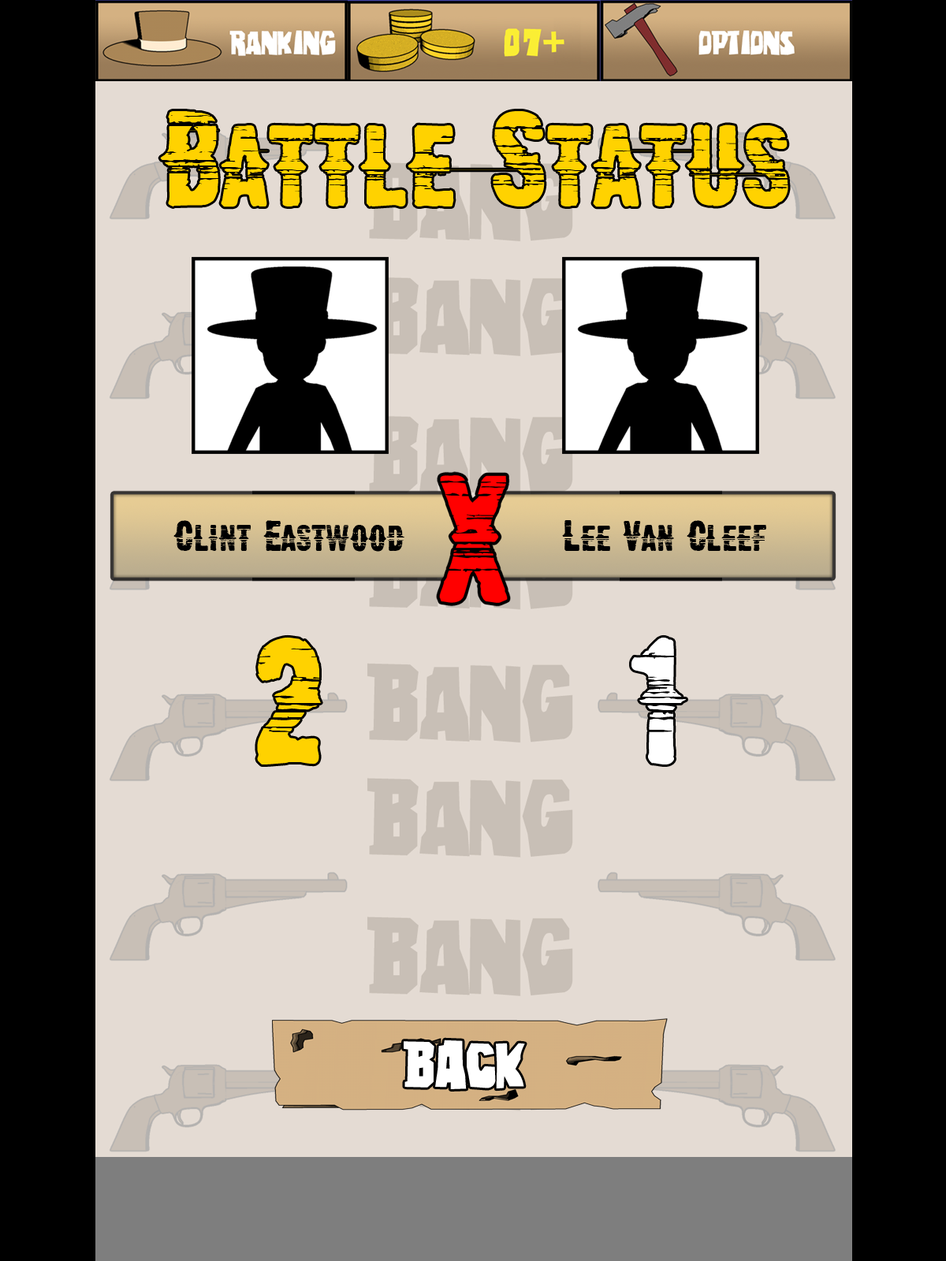
<style>
.page{position:relative;width:946px;height:1261px;background:#e4dbd3}
.page>*{position:absolute;margin:0}
.t1{font:118.2px "CMWesternWoodblockNo2";color:#ffd200}
.t2{font:37.8px "CMWesternWoodblockNo2";color:#000000}
.t3{font:157.6px "CMWesternWoodblockNo2";color:#ffd200}
.t4{font:157.6px "CMWesternWoodblockNo2";color:#ffffff}
.t5{font:56.7px "Eastwood";color:#ffffff}
</style>
<div class="page">
<p class="t1" style="left:160px;top:111px;width:628px;height:96px">Battle Status</p>
<p class="t2" style="left:173px;top:520px;width:231px;height:32px">Clint Eastwood</p>
<p class="t2" style="left:562px;top:520px;width:204px;height:31px">Lee Van Cleef</p>
<p class="t3" style="left:257px;top:637px;width:64px;height:127px">2</p>
<p class="t4" style="left:631px;top:637px;width:55px;height:127px">1</p>
<p class="t5" style="left:403px;top:1039px;width:122px;height:50px">Back</p>
</div>
